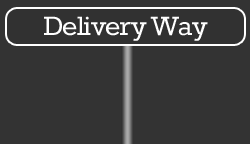
<style>
.page{position:relative;width:250px;height:144px;background:#333333}
.page>*{position:absolute;margin:0}
.t1{font:32.4px "Rokkitt";letter-spacing:-0.025em;color:#ffffff}
</style>
<div class="page">
<p class="t1" style="left:44px;top:16px;width:164px;height:25px">Delivery Way</p>
</div>
